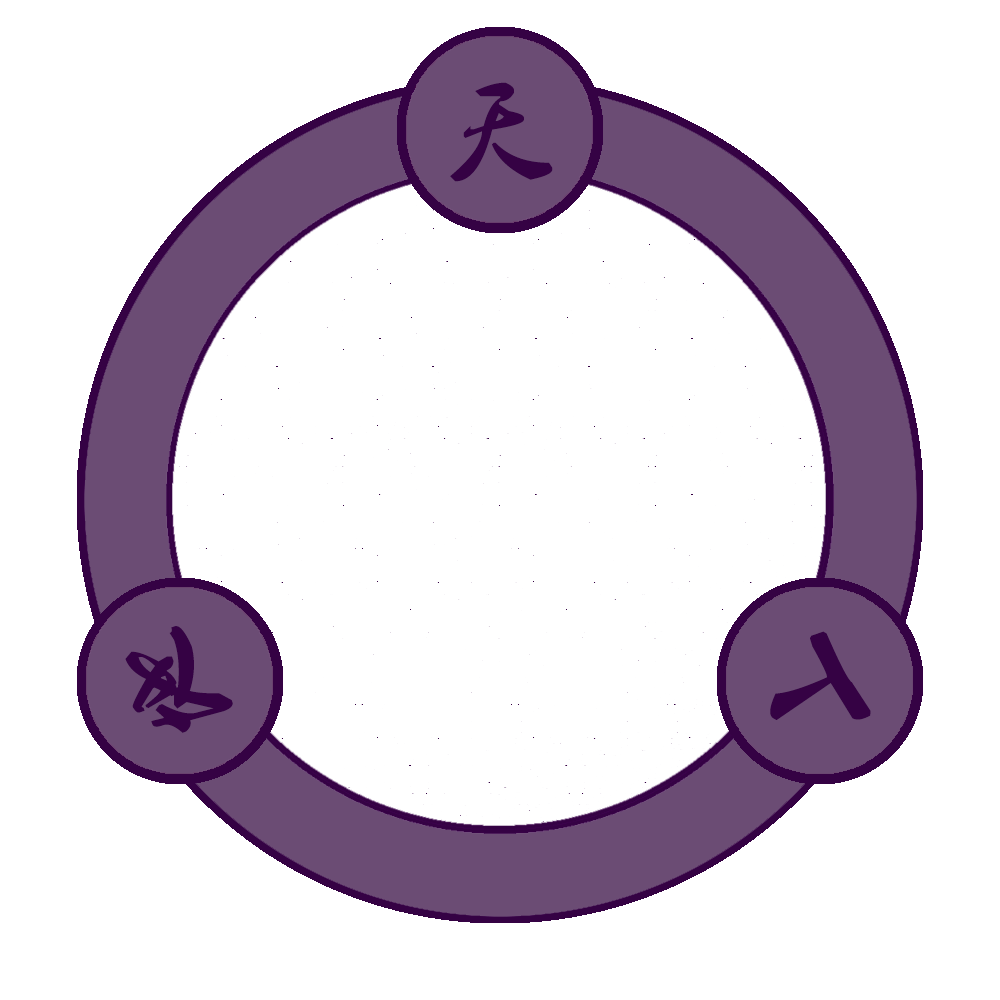
<style>
.page{position:relative;width:1000px;height:1000px;background:#ffffff}
.page>*{position:absolute;margin:0}
.t1{font:106.7px "2.0-";color:#350244}
</style>
<div class="page">
<p class="t1" style="left:450px;top:82px;width:103px;height:100px">天</p>
<p class="t1" style="left:125px;top:626px;width:108px;height:107px;rotate:-110deg">地</p>
<p class="t1" style="left:770px;top:631px;width:101px;height:89px;rotate:120deg">人</p>
</div>
